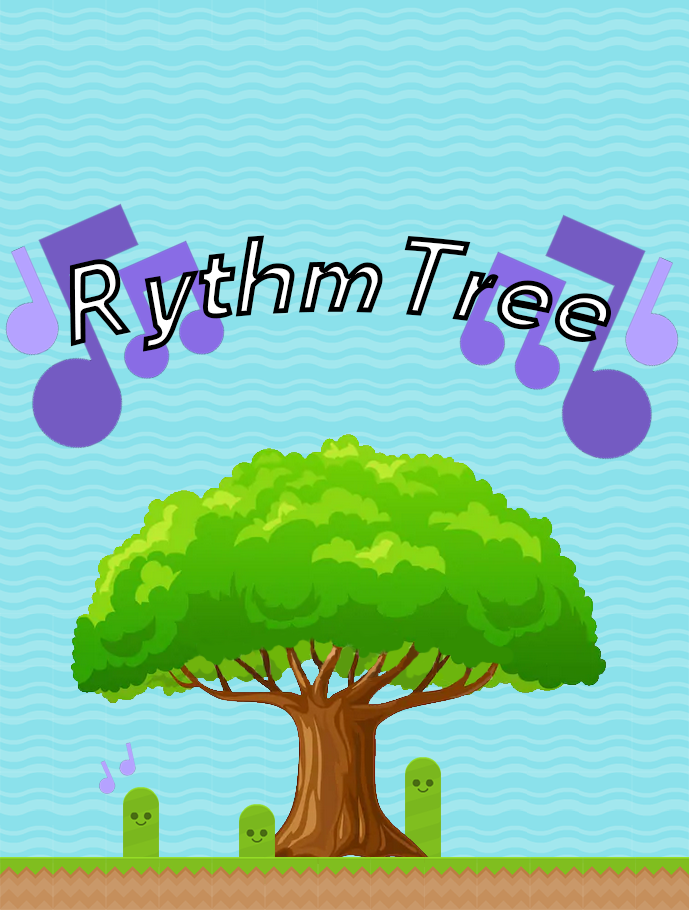
<style>
.page{position:relative;width:689px;height:910px;background:#8be1eb}
.page>*{position:absolute;margin:0}
.t1{font:99.5px "TI-NspireSansBoldItalic"}
</style>
<div class="page">
<p class="t1" style="left:69px;top:235px;width:542px;height:117px">RythmTree</p>
</div>
